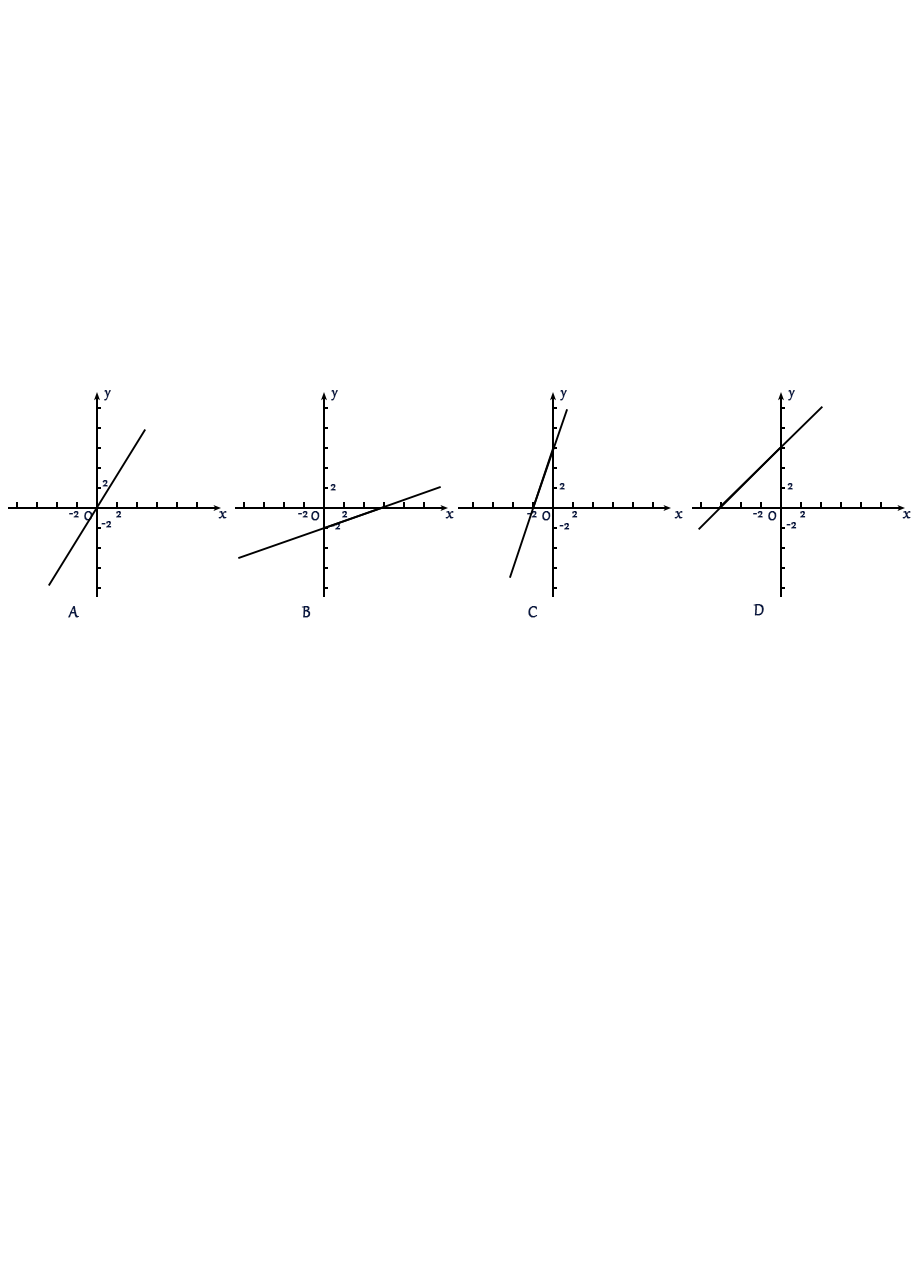
<style>
.page{position:relative;width:916px;height:1268px;background:#ffffff}
.page>*{position:absolute;margin:0}
.t1{font:16px "Gabriola";color:#081842;font-weight:bold}
.t2{font:12px "Gabriola";color:#081842;font-weight:bold}
.t3{font:16px "Gabriola";font-weight:bold}
.t4{font:18.7px "Gabriola";color:#081842;font-weight:bold}
.t5{font:12px "Gabriola";font-weight:bold}
</style>
<div class="page">
<p class="t1" style="left:104px;top:390px;width:7px;height:11px">y</p>
<p class="t1" style="left:331px;top:390px;width:7px;height:11px">y</p>
<p class="t1" style="left:560px;top:390px;width:7px;height:11px">y</p>
<p class="t1" style="left:788px;top:390px;width:7px;height:11px">y</p>
<p class="t2" style="left:102px;top:480px;width:6px;height:7px">2</p>
<p class="t2" style="left:330px;top:484px;width:6px;height:7px">2</p>
<p class="t2" style="left:559px;top:483px;width:6px;height:7px">2</p>
<p class="t2" style="left:787px;top:483px;width:6px;height:7px">2</p>
<p class="t2" style="left:69px;top:511px;width:10px;height:7px">-2</p>
<p class="t3" style="left:84px;top:511px;width:9px;height:10px">O</p>
<p class="t2" style="left:101px;top:521px;width:11px;height:7px">-2</p>
<p class="t2" style="left:116px;top:511px;width:6px;height:7px">2</p>
<p class="t4" style="left:218px;top:511px;width:9px;height:8px">x</p>
<p class="t2" style="left:298px;top:511px;width:10px;height:7px">-2</p>
<p class="t1" style="left:311px;top:511px;width:9px;height:10px">O</p>
<p class="t2" style="left:342px;top:511px;width:6px;height:7px">2</p>
<p class="t4" style="left:445px;top:511px;width:9px;height:8px">x</p>
<p class="t2" style="left:527px;top:511px;width:10px;height:7px">-2</p>
<p class="t1" style="left:542px;top:511px;width:9px;height:10px">O</p>
<p class="t2" style="left:572px;top:511px;width:6px;height:7px">2</p>
<p class="t4" style="left:674px;top:511px;width:9px;height:8px">x</p>
<p class="t2" style="left:753px;top:511px;width:10px;height:7px">-2</p>
<p class="t1" style="left:768px;top:511px;width:9px;height:10px">O</p>
<p class="t2" style="left:800px;top:511px;width:6px;height:7px">2</p>
<p class="t4" style="left:902px;top:511px;width:9px;height:8px">x</p>
<p class="t5" style="left:330px;top:523px;width:11px;height:7px">-2</p>
<p class="t2" style="left:559px;top:523px;width:11px;height:7px">-2</p>
<p class="t2" style="left:786px;top:522px;width:11px;height:7px">-2</p>
<p class="t4" style="left:68px;top:606px;width:11px;height:12px">A</p>
<p class="t4" style="left:301px;top:606px;width:10px;height:12px">B</p>
<p class="t4" style="left:528px;top:606px;width:10px;height:12px">C</p>
<p class="t4" style="left:753px;top:604px;width:11px;height:12px">D</p>
</div>
